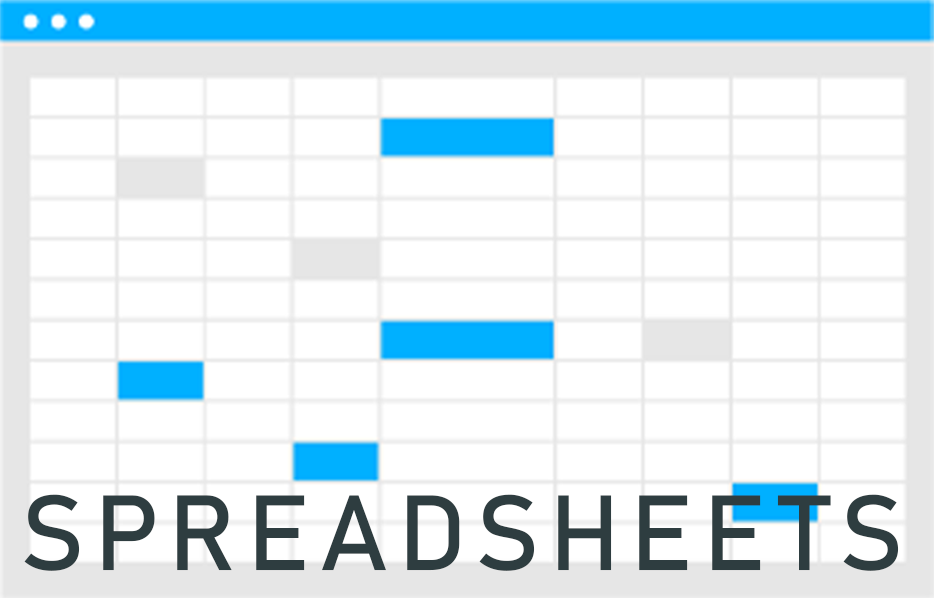
<style>
.page{position:relative;width:934px;height:598px;background:#ffffff}
.page>*{position:absolute;margin:0}
.t1{font:104.6px "Bahnschrift";letter-spacing:0.1em;color:#2e3d40;font-weight:bold}
</style>
<div class="page">
<p class="t1" style="left:24px;top:494px;width:875px;height:77px">SPREADSHEETS</p>
</div>
